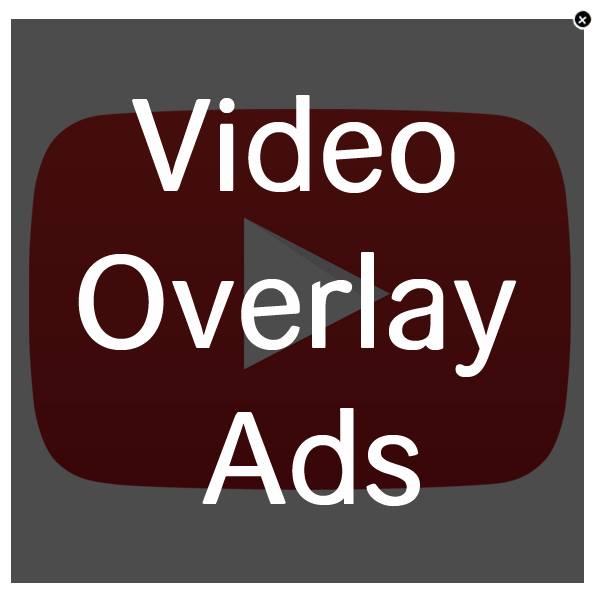
<style>
.page{position:relative;width:600px;height:600px;background:#4c4c4c}
.page>*{position:absolute;margin:0}
.t1{font:130.4px "helvari";color:#fefefe}
</style>
<div class="page">
<p class="t1" style="left:78px;top:95px;width:439px;height:412px;text-align:center">Video <br>Overlay <br>Ads</p>
</div>
